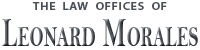
<style>
.page{position:relative;width:200px;height:50px;background:#ffffff}
.page>*{position:absolute;margin:0}
.t1{font:11.1px "MyriadPro-Semibold";letter-spacing:0.05em;color:#4b5056;scale:1.13 1}
.t2{font:41.8px "BellMTBold";letter-spacing:0.005em;font-variant:small-caps;scale:0.61 1}
</style>
<div class="page">
<p class="t1" style="left:32px;top:2px;width:135px;height:8px">THE  LAW  OFFICES  OF</p>
<p class="t2" style="left:2px;top:19px;width:196px;height:27px">Leonard Morales</p>
</div>
